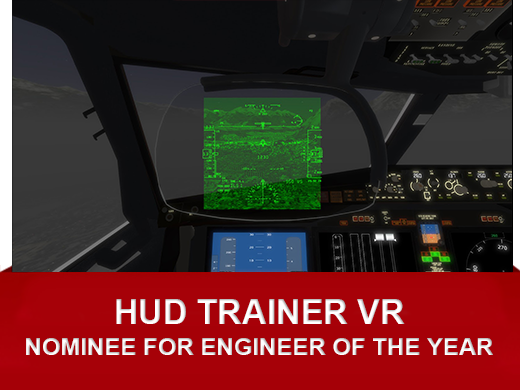
<style>
.page{position:relative;width:520px;height:390px}
.page>*{position:absolute;margin:0}
.t1{font:24px/31px "Arial-BoldMT";color:#ffffff}
.t2{font:34px/31px "Arial-BoldMT";color:#ffffff}
</style>
<div class="page">
<p class="t1" style="left:26px;top:299px;width:467px;height:56px;text-align:center"><span class="t2">HUD TRAINER VR<br></span>NOMINEE FOR ENGINEER OF THE YEAR</p>
</div>
